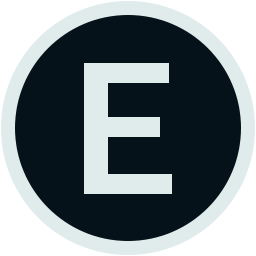
<style>
.page{position:relative;width:256px;height:256px;background:#061219}
.page>*{position:absolute;margin:0}
.t1{font:200px "Corbel-Bold";letter-spacing:0.02em;color:#dfeceb}
</style>
<div class="page">
<p class="t1" style="left:84px;top:63px;width:88px;height:131px">E</p>
</div>
